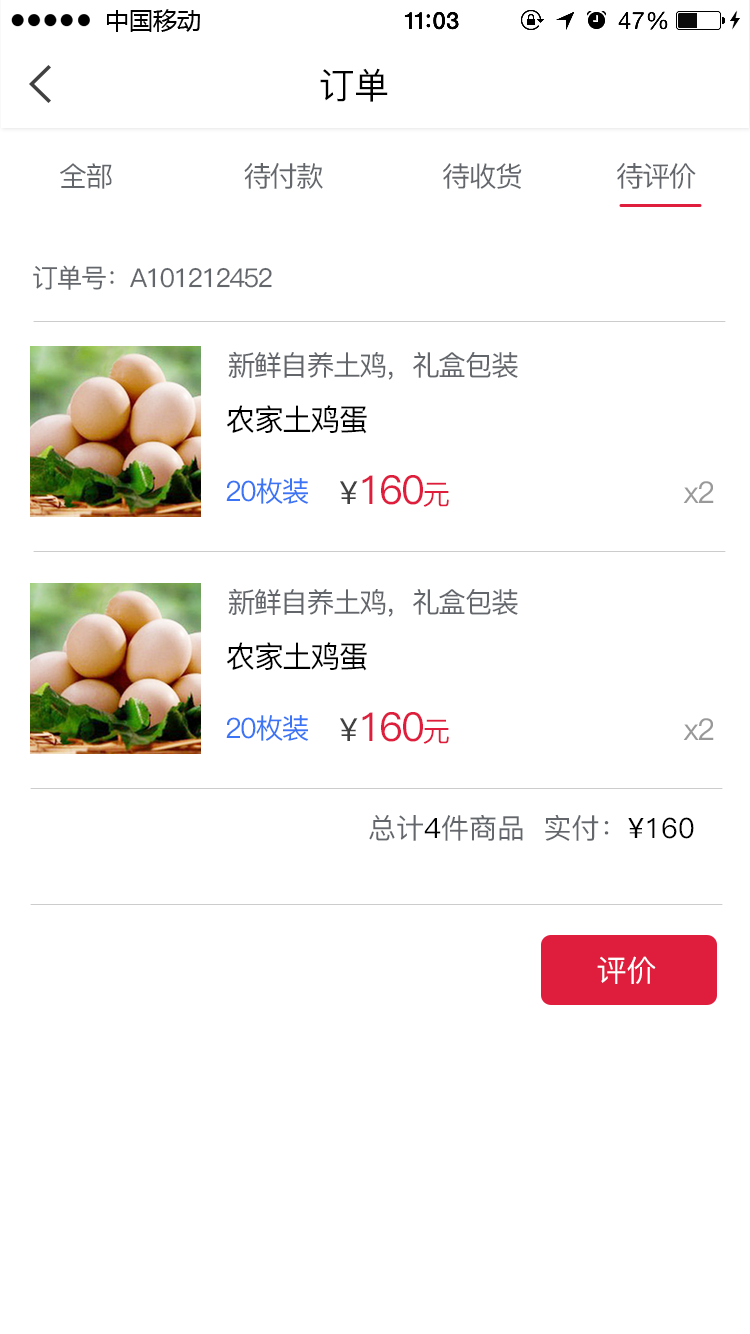
<style>
.page{position:relative;width:750px;height:1334px;background:#ffffff}
.page>*{position:absolute;margin:0}
.t1{font:35.7px "PingFang-SC-Medium";color:#000000}
.t2{font:27.7px "PingFang-SC-Medium";letter-spacing:-0.06em;color:#63666b}
.t3{font:28px "PingFang-SC-Medium";letter-spacing:-0.06em;color:#63666b}
.t4{font:26px "PingFang-SC-Medium";letter-spacing:-0.06em;color:#63666b}
.t5{font:30px "PingFang-SC-Medium";letter-spacing:-0.06em;color:#000000}
.t6{font:28px "PingFang-SC-Medium";letter-spacing:-0.06em;color:#3b74f4}
.t7{font:40px "PingFang-SC-Medium";letter-spacing:-0.06em;color:#df1e3e}
.t8{font:32px "PingFang-SC-Medium";color:#414141}
.t9{font:28px "PingFang-SC-Medium";letter-spacing:-0.06em;color:#df1e3e}
.t10{font:30px "PingFang-SC-Medium";letter-spacing:-0.06em;color:#999999}
.t11{font:28px "PingFang-SC-Medium";color:#63666b}
.t12{font:28px "PingFang-SC-Medium";color:#000000}
.t13{font:30px "PingFang-SC-Medium";color:#ffffff}
</style>
<div class="page">
<p class="t1" style="left:320px;top:68px;width:68px;height:34px">订单</p>
<p class="t2" style="left:60px;top:163px;width:52px;height:26px">全部</p>
<p class="t3" style="left:244px;top:163px;width:79px;height:26px">待付款</p>
<p class="t2" style="left:443px;top:163px;width:79px;height:26px">待收货</p>
<p class="t3" style="left:617px;top:163px;width:79px;height:26px">待评价</p>
<p class="t4" style="left:33px;top:265px;width:239px;height:25px">订单号：A101212452</p>
<p class="t3" style="left:228px;top:351px;width:290px;height:29px">新鲜自养土鸡，礼盒包装</p>
<p class="t5" style="left:227px;top:405px;width:140px;height:29px">农家土鸡蛋</p>
<p class="t6" style="left:226px;top:478px;width:83px;height:26px">20枚装</p>
<p class="t7" style="left:340px;top:475px;width:109px;height:32px"><span class="t8">¥</span>160<span class="t9">元</span></p>
<p class="t10" style="left:683px;top:481px;width:31px;height:22px">x2</p>
<p class="t3" style="left:228px;top:588px;width:290px;height:29px">新鲜自养土鸡，礼盒包装</p>
<p class="t5" style="left:227px;top:642px;width:140px;height:29px">农家土鸡蛋</p>
<p class="t7" style="left:340px;top:712px;width:109px;height:32px"><span class="t8">¥</span>160<span class="t9">元</span></p>
<p class="t6" style="left:226px;top:715px;width:83px;height:26px">20枚装</p>
<p class="t10" style="left:683px;top:718px;width:31px;height:22px">x2</p>
<p class="t11" style="left:369px;top:814px;width:325px;height:27px">总计<span class="t12">4</span>件商品  实付：<span class="t12">¥160</span></p>
<p class="t13" style="left:597px;top:956px;width:59px;height:28px">评价</p>
</div>
